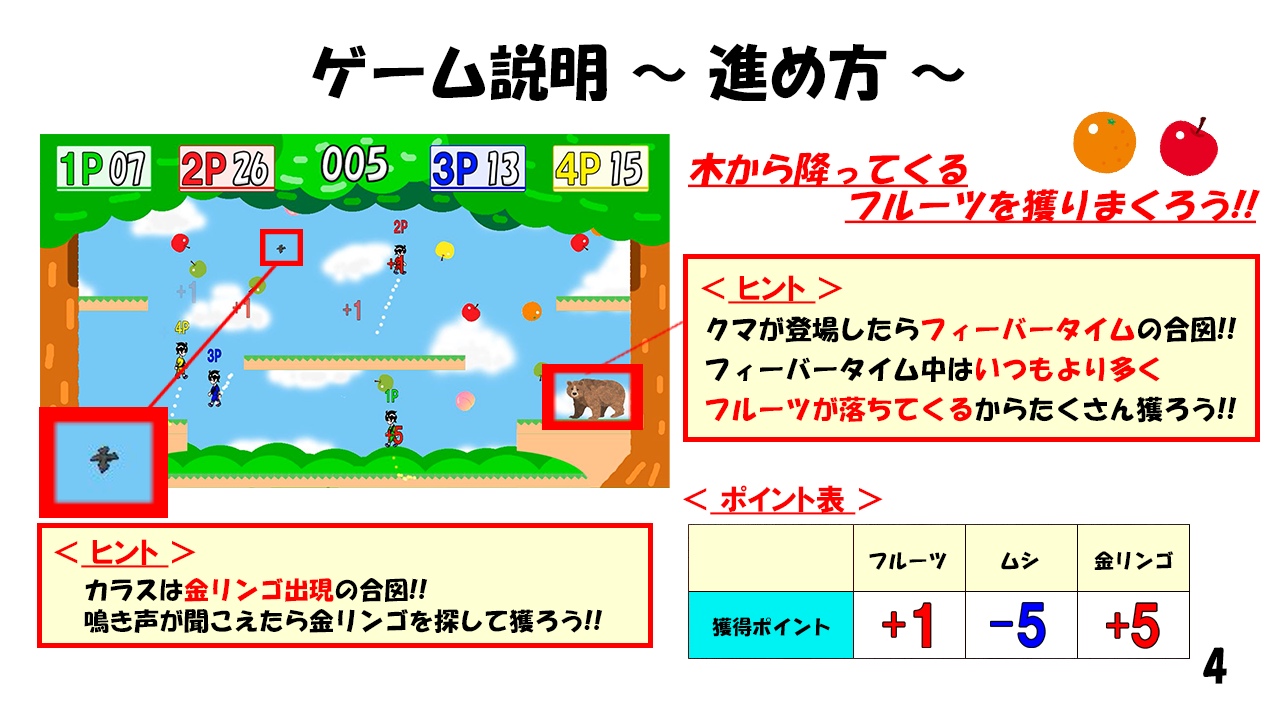
<style>
.page{position:relative;width:1280px;height:720px;background:#ffffff}
.page>*{position:absolute;margin:0}
.t1{font:60px "HGSSoeiKakupoptai";color:#000000}
.t2{font:35px/36px "HGSSoeiKakupoptai";color:#ff0000;font-style:italic;text-decoration:underline}
.t3{font:30px "HGPSoeiKakugothicUB";color:#ff0000;text-decoration:underline}
.t4{font:30px "HGPSoeiKakugothicUB";color:#ff0000}
.t5{font:27px/40px "HGSSoeiKakupoptai";color:#ff0000}
.t6{font:27px/40px "HGSSoeiKakupoptai";color:#000000}
.t7{font:25px "HGSSoeiKakupoptai";color:#ff0000}
.t8{font:25px "HGSSoeiKakupoptai";color:#000000}
.t9{font:40px "HGSSoeiKakupoptai";color:#000000}
</style>
<div class="page">
<p class="t1" style="left:312px;top:43px;width:653px;height:58px">ゲーム説明 〜 進め方 〜</p>
<p class="t2" style="left:688px;top:152px;width:572px;height:72px">木から降ってくる<br>フルーツを獲りまくろう!!</p>
<p class="t3" style="left:701px;top:275px;width:142px;height:29px"><span class="t4">＜</span> ヒント <span class="t4">＞</span></p>
<p class="t5" style="left:705px;top:316px;width:532px;height:107px"><span class="t6">クマが登場したら</span>フィーバータイム<span class="t6">の合図!!<br>フィーバータイム中は</span>いつもより多く<br>フルーツが落ちてくる<span class="t6">からたくさん獲ろう!!</span></p>
<p class="t3" style="left:683px;top:485px;width:200px;height:30px"><span class="t4">＜</span> ポイント表 <span class="t4">＞</span></p>
<p class="t3" style="left:54px;top:539px;width:142px;height:29px"><span class="t4">＜</span> ヒント <span class="t4">＞</span></p>
<p class="t7" style="left:85px;top:578px;width:343px;height:24px"><span class="t8">カラスは</span>金リンゴ出現<span class="t8">の合図!!</span></p>
<p class="t8" style="left:84px;top:609px;width:519px;height:24px">鳴き声が聞こえたら金リンゴを探して獲ろう!!</p>
<p class="t9" style="left:1203px;top:647px;width:24px;height:37px">4</p>
</div>
